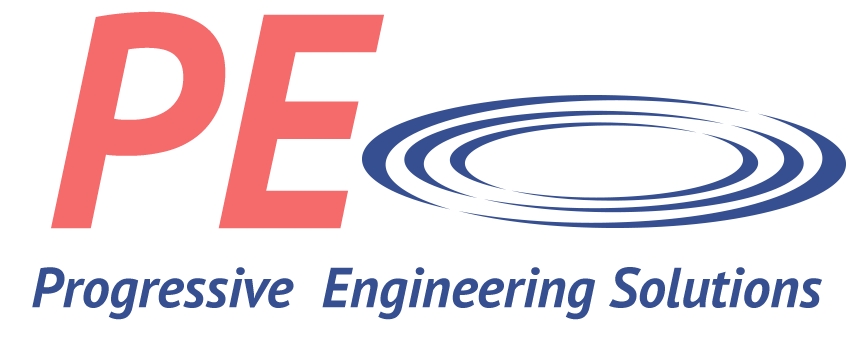
<style>
.page{position:relative;width:854px;height:354px;background:#ffffff}
.page>*{position:absolute;margin:0}
.t1{font:304.5px "PTSans-BoldItalic";color:#f56a6a}
.t2{font:56.3px "PTSans-BoldItalic";color:#364f91}
</style>
<div class="page">
<p class="t1" style="left:51px;top:11px;width:333px;height:218px">PE</p>
<p class="t2" style="left:32px;top:267px;width:790px;height:53px">Progressive  Engineering Solutions</p>
</div>
